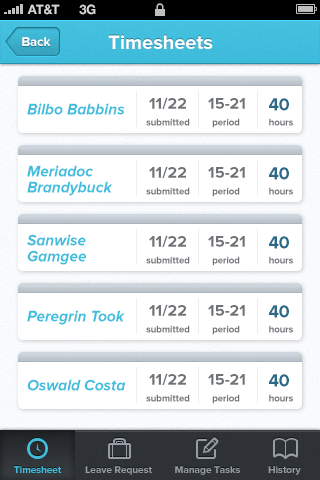
<style>
.page{position:relative;width:320px;height:480px;background:#ffffff}
.page>*{position:absolute;margin:0}
.t1{font:13px "HelveticaNeue-Bold";color:#d4d4d4;text-transform:uppercase}
.t2{font:13px "ProximaNova-Bold";color:#ffffff}
.t3{font:20px "ProximaNova-Bold";color:#ffffff}
.t4{font:16px "ProximaNova-Bold";color:#6f7276}
.t5{font:18px "ProximaNova-Bold";color:#2a6a88;scale:0.97 1}
.t6{font:16px "ProximaNova-BoldIt";color:#41bedd;scale:0.97 1}
.t7{font:10px "ProximaNova-Bold";color:#6f7276;scale:0.95 1}
.t8{font:16px/16px "ProximaNova-BoldIt";color:#41bedd;scale:0.97 1}
.t9{font:10px "ProximaNova-Bold";color:#41bedd}
.t10{font:10px "ProximaNova-Bold";color:#959ca3}
</style>
<div class="page">
<p class="t1" style="left:27px;top:4px;width:33px;height:11px">AT&amp;t</p>
<p class="t1" style="left:79px;top:4px;width:17px;height:11px">3G</p>
<p class="t2" style="left:22px;top:37px;width:29px;height:9px">Back</p>
<p class="t3" style="left:108px;top:35px;width:105px;height:14px">Timesheets</p>
<p class="t4" style="left:149px;top:97px;width:37px;height:12px">11/22</p>
<p class="t4" style="left:208px;top:98px;width:37px;height:11px">15-21</p>
<p class="t5" style="left:269px;top:98px;width:20px;height:13px">40</p>
<p class="t6" style="left:27px;top:103px;width:98px;height:12px">Bilbo Babbins</p>
<p class="t7" style="left:146px;top:118px;width:44px;height:8px">submitted</p>
<p class="t7" style="left:212px;top:118px;width:28px;height:10px">period</p>
<p class="t7" style="left:269px;top:118px;width:24px;height:8px">hours</p>
<p class="t8" style="left:27px;top:165px;width:86px;height:31px">Meriadoc<br>Brandybuck</p>
<p class="t4" style="left:149px;top:166px;width:37px;height:12px">11/22</p>
<p class="t4" style="left:208px;top:167px;width:37px;height:11px">15-21</p>
<p class="t5" style="left:269px;top:167px;width:20px;height:13px">40</p>
<p class="t7" style="left:146px;top:187px;width:44px;height:8px">submitted</p>
<p class="t7" style="left:212px;top:187px;width:28px;height:10px">period</p>
<p class="t7" style="left:269px;top:187px;width:24px;height:8px">hours</p>
<p class="t8" style="left:27px;top:234px;width:59px;height:31px">Sanwise<br>Gamgee</p>
<p class="t4" style="left:149px;top:235px;width:37px;height:12px">11/22</p>
<p class="t4" style="left:208px;top:236px;width:37px;height:11px">15-21</p>
<p class="t5" style="left:269px;top:236px;width:20px;height:13px">40</p>
<p class="t7" style="left:146px;top:256px;width:44px;height:8px">submitted</p>
<p class="t7" style="left:212px;top:256px;width:28px;height:10px">period</p>
<p class="t7" style="left:269px;top:256px;width:24px;height:8px">hours</p>
<p class="t4" style="left:149px;top:304px;width:37px;height:12px">11/22</p>
<p class="t4" style="left:208px;top:305px;width:37px;height:11px">15-21</p>
<p class="t5" style="left:269px;top:305px;width:20px;height:13px">40</p>
<p class="t6" style="left:27px;top:310px;width:98px;height:15px">Peregrin Took</p>
<p class="t7" style="left:146px;top:325px;width:44px;height:8px">submitted</p>
<p class="t7" style="left:212px;top:325px;width:28px;height:10px">period</p>
<p class="t7" style="left:269px;top:325px;width:24px;height:8px">hours</p>
<p class="t4" style="left:149px;top:373px;width:37px;height:12px">11/22</p>
<p class="t4" style="left:208px;top:374px;width:37px;height:11px">15-21</p>
<p class="t5" style="left:269px;top:374px;width:20px;height:13px">40</p>
<p class="t6" style="left:27px;top:379px;width:99px;height:12px">Oswald Costa</p>
<p class="t7" style="left:146px;top:394px;width:44px;height:8px">submitted</p>
<p class="t7" style="left:212px;top:394px;width:28px;height:10px">period</p>
<p class="t7" style="left:269px;top:394px;width:24px;height:8px">hours</p>
<p class="t9" style="left:14px;top:466px;width:48px;height:7px">Timesheet</p>
<p class="t9" style="left:14px;top:466px;width:48px;height:7px">Timesheet</p>
<p class="t10" style="left:85px;top:466px;width:67px;height:9px">Leave Request</p>
<p class="t10" style="left:175px;top:466px;width:65px;height:9px">Manage Tasks</p>
<p class="t10" style="left:268px;top:466px;width:33px;height:9px">History</p>
</div>
